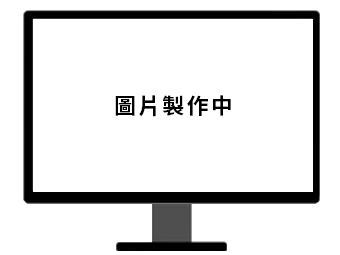
<style>
.page{position:relative;width:340px;height:255px;background:#ffffff}
.page>*{position:absolute;margin:0}
.t1{font:22px "NotoSansTC-Bold";letter-spacing:0.1em;color:#000000}
</style>
<div class="page">
<p class="t1" style="left:115px;top:95px;width:116px;height:22px">圖片製作中</p>
</div>
